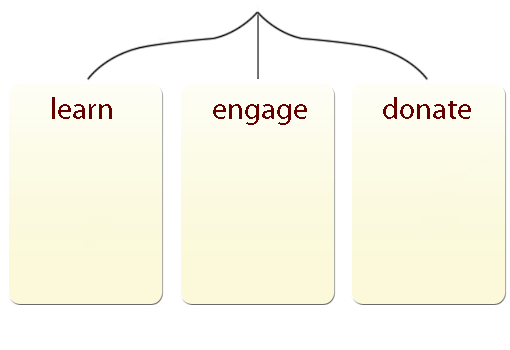
<style>
.page{position:relative;width:510px;height:350px;background:#ffffff}
.page>*{position:absolute;margin:0}
.t1{font:30px "MyriadPro-Regular";color:#660000}
</style>
<div class="page">
<p class="t1" style="left:52px;top:97px;width:60px;height:22px">learn</p>
<p class="t1" style="left:383px;top:97px;width:88px;height:22px">donate</p>
<p class="t1" style="left:213px;top:104px;width:94px;height:21px">engage</p>
</div>
